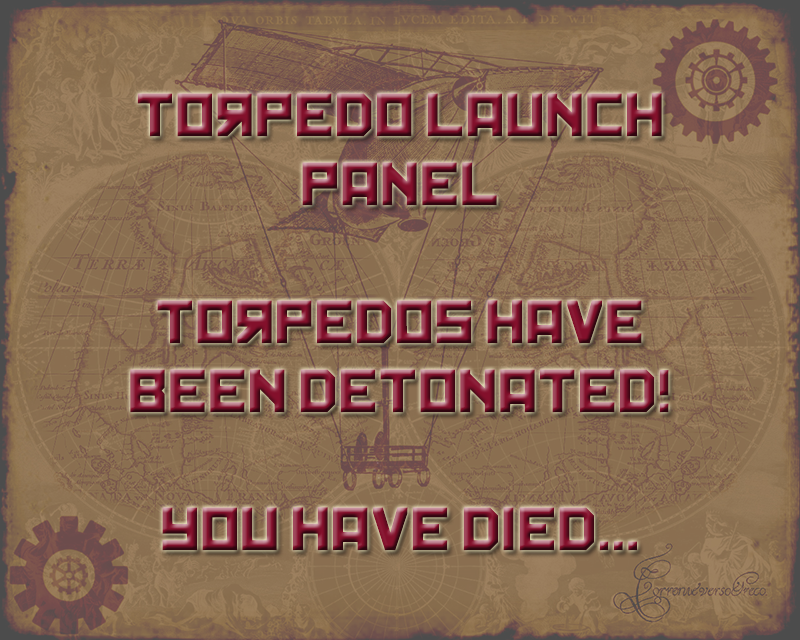
<style>
.page{position:relative;width:800px;height:640px}
.page>*{position:absolute;margin:0}
.t1{font:57.5px "Kremlin"}
</style>
<div class="page">
<p class="t1" style="left:130px;top:93px;width:539px;height:458px;text-align:center">TOrPEDO LAUNCH<br>PANEL<br><br>TOrPEDOs havE<br>BEEN DETONATED!<br><br>YOU HAVE DIED...</p>
</div>
